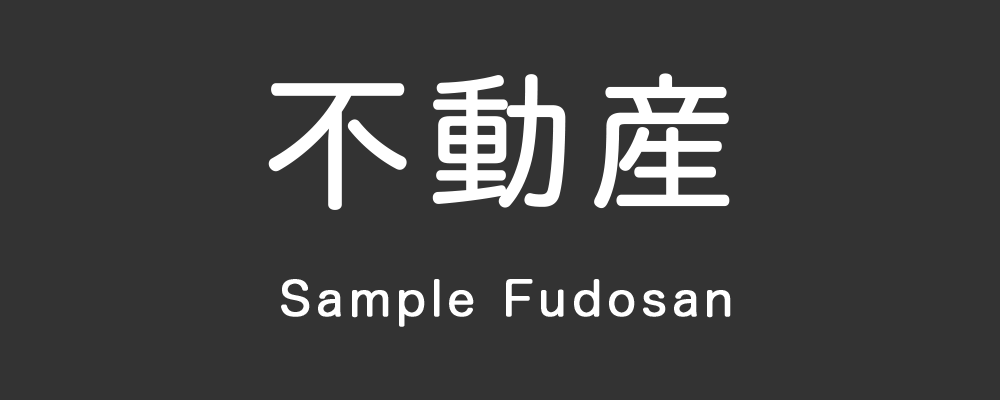
<style>
.page{position:relative;width:1000px;height:400px;background:#333333}
.page>*{position:absolute;margin:0}
.t1{font:145px "HiraMaruProN-W4";letter-spacing:0.1em;color:#ffffff;font-weight:bold}
.t2{font:46.6px "HiraMaruProN-W4";letter-spacing:0.1em;color:#ffffff;font-weight:bold}
</style>
<div class="page">
<p class="t1" style="left:268px;top:73px;width:462px;height:137px">不動産</p>
<p class="t2" style="left:281px;top:279px;width:450px;height:48px">Sample Fudosan</p>
</div>
